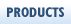
<style>
.page{position:relative;width:71px;height:24px}
.page>*{position:absolute;margin:0}
.t1{font:14px "Humanist521BT-BoldCondensed";color:#2d5078}
</style>
<div class="page">
<p class="t1" style="left:7px;top:7px;width:57px;height:10px">PRODUCTS</p>
</div>
